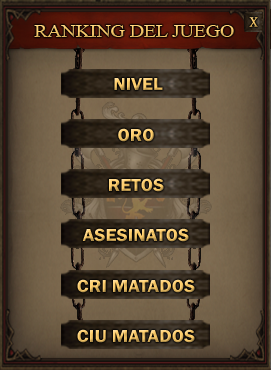
<style>
.page{position:relative;width:271px;height:370px}
.page>*{position:absolute;margin:0}
.t1{font:13.9px "TimesNewRomanPSMT";text-transform:uppercase;font-weight:bold;scale:0.8 1}
.t2{font:18px "TimesNewRomanPSMT";scale:1.09 1}
.t3{font:18px "FranklinGothic-Demi";scale:1.07 1}
</style>
<div class="page">
<p class="t1" style="left:249px;top:17px;width:9px;height:10px">X</p>
<p class="t2" style="left:34px;top:25px;width:200px;height:12px">RANKING DEL JUEGO</p>
<p class="t3" style="left:114px;top:78px;width:49px;height:12px">NIVEL</p>
<p class="t3" style="left:118px;top:128px;width:36px;height:14px">ORO</p>
<p class="t3" style="left:109px;top:178px;width:55px;height:14px">RETOS</p>
<p class="t3" style="left:82px;top:228px;width:107px;height:14px">ASESINATOS</p>
<p class="t3" style="left:77px;top:279px;width:118px;height:14px">CRI MATADOS</p>
<p class="t3" style="left:77px;top:329px;width:118px;height:14px">CIU MATADOS</p>
</div>
